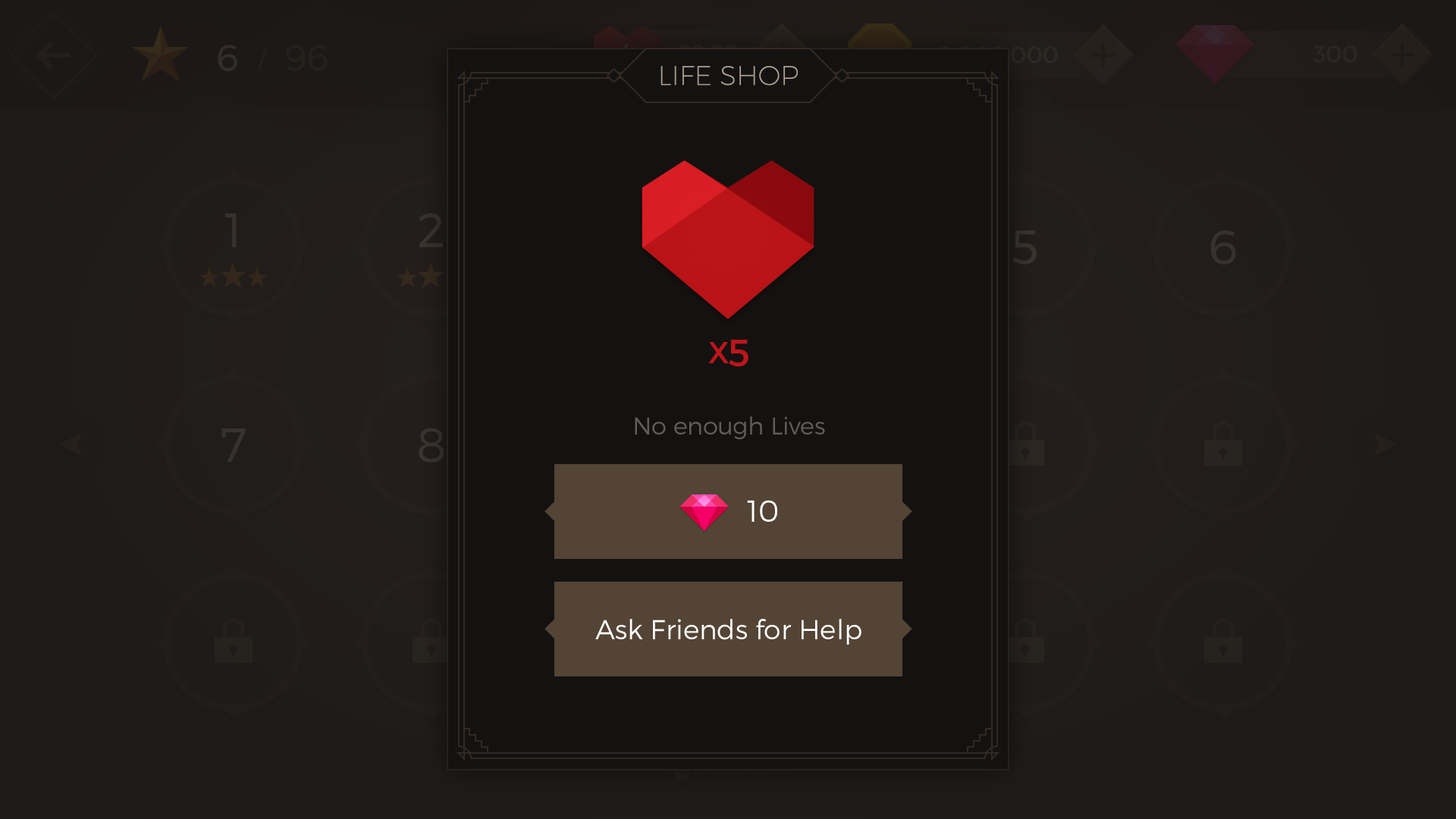
<style>
.page{position:relative;width:1456px;height:819px;background:#141211}
.page>*{position:absolute;margin:0}
.t1{font:27.2px "Montserrat-UltraLight";color:#aea190;text-transform:uppercase}
.t2{font:30.3px "Montserrat-Regular";color:#be151a;text-transform:uppercase}
.t3{font:37.9px "Montserrat-Regular";color:#be151a;text-transform:uppercase}
.t4{font:24.3px "Montserrat-Light";color:#605d5a}
.t5{font:30.3px "Montserrat-Light";color:#ffffff}
.t6{font:27.3px "Montserrat-Light";color:#ffffff}
</style>
<div class="page">
<p class="t1" style="left:660px;top:66px;width:138px;height:20px">life shop</p>
<p class="t2" style="left:708px;top:340px;width:40px;height:27px">x<span class="t3">5</span></p>
<p class="t4" style="left:635px;top:416px;width:190px;height:24px">No enough Lives</p>
<p class="t5" style="left:747px;top:500px;width:30px;height:22px">10</p>
<p class="t6" style="left:595px;top:619px;width:266px;height:26px">Ask Friends for Help</p>
</div>
